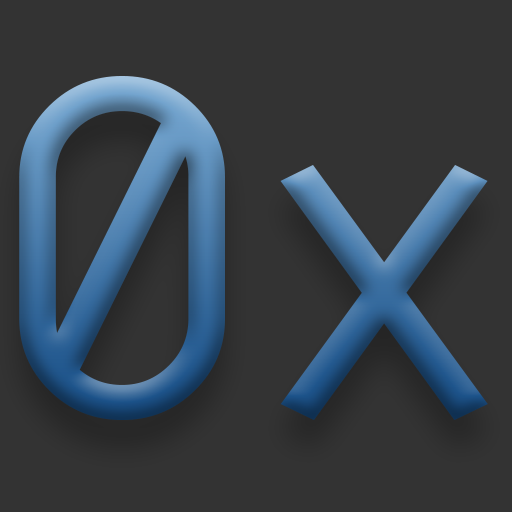
<style>
.page{position:relative;width:512px;height:512px;background:#333333}
.page>*{position:absolute;margin:0}
.t1{font:466.7px "NovaMono"}
</style>
<div class="page">
<p class="t1" style="left:19px;top:76px;width:469px;height:344px">0x</p>
</div>
